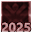
<style>
.page{position:relative;width:32px;height:32px}
.page>*{position:absolute;margin:0}
.t1{font:12px "MicrosoftYaHeiUI-Bold";color:#c49c9e}
</style>
<div class="page">
<p class="t1" style="left:1px;top:22px;width:30px;height:11px">2025</p>
</div>
